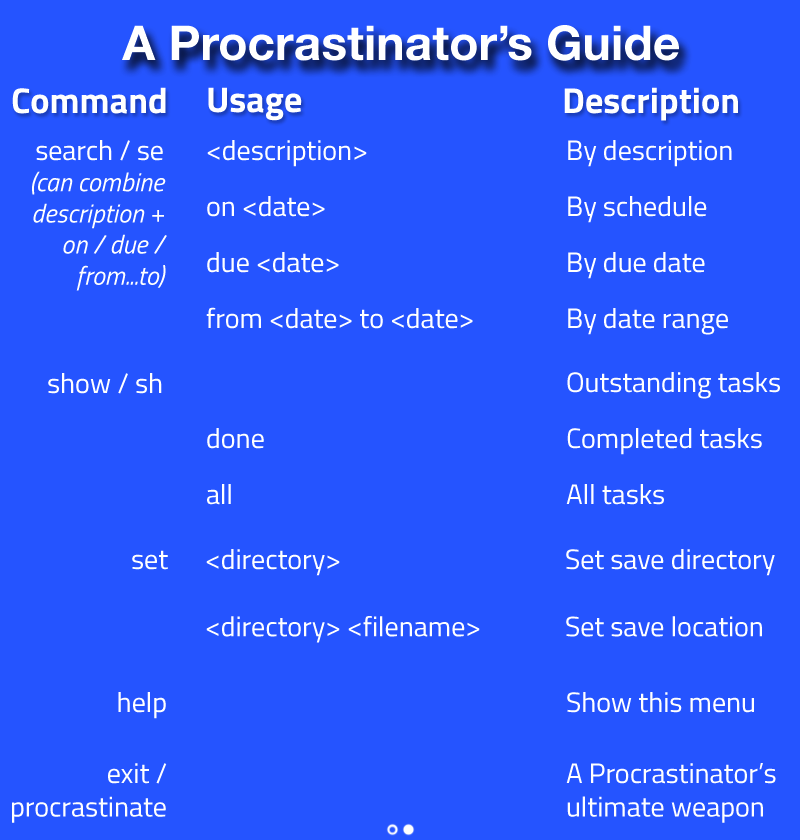
<style>
.page{position:relative;width:800px;height:840px;background:#2554ff}
.page>*{position:absolute;margin:0}
.t1{font:48px "HelveticaNeue-Bold";color:#ffffff}
.t2{font:36px "Titillium-Bold";color:#ffffff}
.t3{font:26px "Titillium-RegularItalic";color:#ffffff}
.t4{font:28px "Titillium-Regular";color:#ffffff}
.t5{font:28px/28px "Titillium-Regular";color:#ffffff}
</style>
<div class="page">
<p class="t1" style="left:122px;top:25px;width:557px;height:36px">A Procrastinator’s Guide</p>
<p class="t2" style="left:12px;top:87px;width:154px;height:27px">Command</p>
<p class="t2" style="left:208px;top:87px;width:94px;height:34px">Usage</p>
<p class="t2" style="left:564px;top:87px;width:174px;height:34px">Description</p>
<p class="t3" style="left:32px;top:140px;width:135px;height:151px;text-align:right"><span class="t4">search / se<br></span>(can combine<br>description +<br>on / due /<br>from...to)</p>
<p class="t5" style="left:206px;top:140px;width:526px;height:195px">&lt;description&gt;   By description<br><br>on &lt;date&gt;    By schedule<br><br>due &lt;date&gt;    By due date<br><br>from &lt;date&gt; to &lt;date&gt;  By date range</p>
<p class="t4" style="left:48px;top:373px;width:114px;height:21px">show / sh</p>
<p class="t5" style="left:207px;top:372px;width:573px;height:133px">Outstanding tasks<br><br>done     Completed tasks<br><br>all     All tasks</p>
<p class="t4" style="left:132px;top:550px;width:36px;height:20px">set</p>
<p class="t4" style="left:206px;top:549px;width:569px;height:94px">&lt;directory&gt;    Set save directory<br><br>&lt;directory&gt; &lt;filename&gt;  Set save location</p>
<p class="t4" style="left:118px;top:692px;width:48px;height:27px">help</p>
<p class="t4" style="left:567px;top:692px;width:187px;height:21px">Show this menu</p>
<p class="t4" style="left:12px;top:763px;width:155px;height:60px;text-align:right">exit /<br>procrastinate</p>
<p class="t4" style="left:566px;top:763px;width:210px;height:60px">A Procrastinator’s<br>     ultimate weapon</p>
</div>
